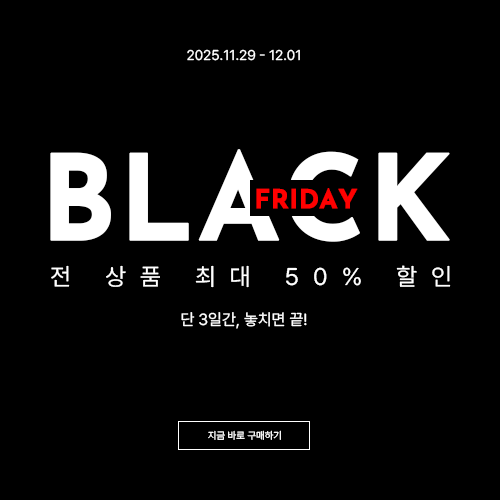
<style>
.page{position:relative;width:500px;height:500px;background:#000000}
.page>*{position:absolute;margin:0}
.t1{font:14px "Pretendard-Regular";color:#ffffff;text-transform:uppercase}
.t2{font:117.7px "JosefinSans-Bold";color:#ffffff;text-transform:uppercase;font-weight:bold}
.t3{font:26px "JosefinSans-Bold";color:#ff0000;text-transform:uppercase;font-weight:bold}
.t4{font:24px "Pretendard-Regular";letter-spacing:0.57em;color:#ffffff;text-transform:uppercase}
.t5{font:16px "Pretendard-Regular";color:#ffffff;text-transform:uppercase}
.t6{font:10px "Pretendard-Regular";color:#ffffff;text-transform:uppercase}
</style>
<div class="page">
<p class="t1" style="left:187px;top:49px;width:113px;height:12px">2025.11.29 - 12.01</p>
<p class="t2" style="left:50px;top:149px;width:400px;height:93px">black</p>
<p class="t3" style="left:256px;top:188px;width:102px;height:21px">friday</p>
<p class="t4" style="left:51px;top:265px;width:400px;height:23px">전 상품 최대 50% 할인</p>
<p class="t5" style="left:181px;top:312px;width:126px;height:17px">단 3일간, 놓치면 끝!</p>
<p class="t6" style="left:208px;top:430px;width:73px;height:10px">지금 바로 구매하기</p>
</div>
